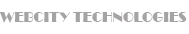
<style>
.page{position:relative;width:189px;height:34px;background:#ffffff}
.page>*{position:absolute;margin:0}
.t1{font:14px "Broadway";color:#a6a3a3}
</style>
<div class="page">
<p class="t1" style="left:0px;top:12px;width:187px;height:11px">WEBCITY TECHNOLOGIES</p>
</div>
